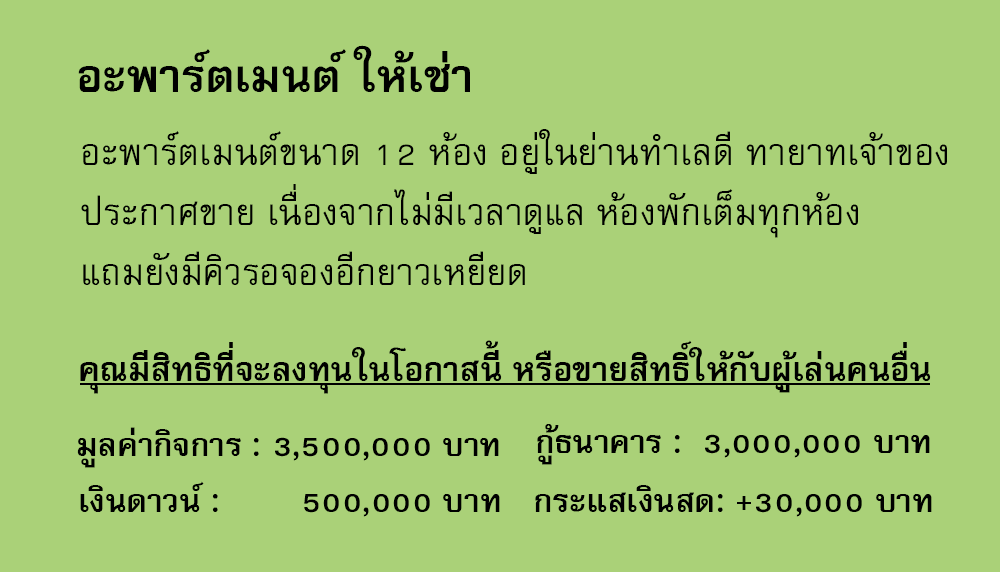
<style>
.page{position:relative;width:1000px;height:572px;background:#aad178}
.page>*{position:absolute;margin:0}
.t1{font:64px "FreesiaUPCBold";color:#000000}
.t2{font:51px/60px "FreesiaUPC";color:#000000}
.t3{font:47px "FreesiaUPCBold";color:#000000}
.t4{font:45px "FreesiaUPCBold";color:#000000}
</style>
<div class="page">
<p class="t1" style="left:78px;top:45px;width:392px;height:47px">อะพาร์ตเมนต์ ให้เช่า</p>
<p class="t2" style="left:81px;top:129px;width:866px;height:156px">อะพาร์ตเมนต์ขนาด 12 ห้อง อยู่ในย่านทำเลดี ทายาทเจ้าของ<br>ประกาศขาย เนื่องจากไม่มีเวลาดูแล ห้องพักเต็มทุกห้อง<br>แถมยังมีคิวรอจองอีกยาวเหยียด</p>
<p class="t3" style="left:80px;top:340px;width:851px;height:54px">คุณมีสิทธิที่จะลงทุนในโอกาสนี้ หรือขายสิทธิ์ให้กับผู้เล่นคนอื่น</p>
<p class="t4" style="left:537px;top:424px;width:393px;height:41px">กู้ธนาคาร :  3,000,000 บาท</p>
<p class="t4" style="left:77px;top:427px;width:422px;height:41px">มูลค่ากิจการ : 3,500,000 บาท</p>
<p class="t4" style="left:80px;top:481px;width:420px;height:36px">เงินดาวน์ :        500,000 บาท</p>
<p class="t4" style="left:535px;top:485px;width:397px;height:32px">กระแสเงินสด: +30,000 บาท</p>
</div>
